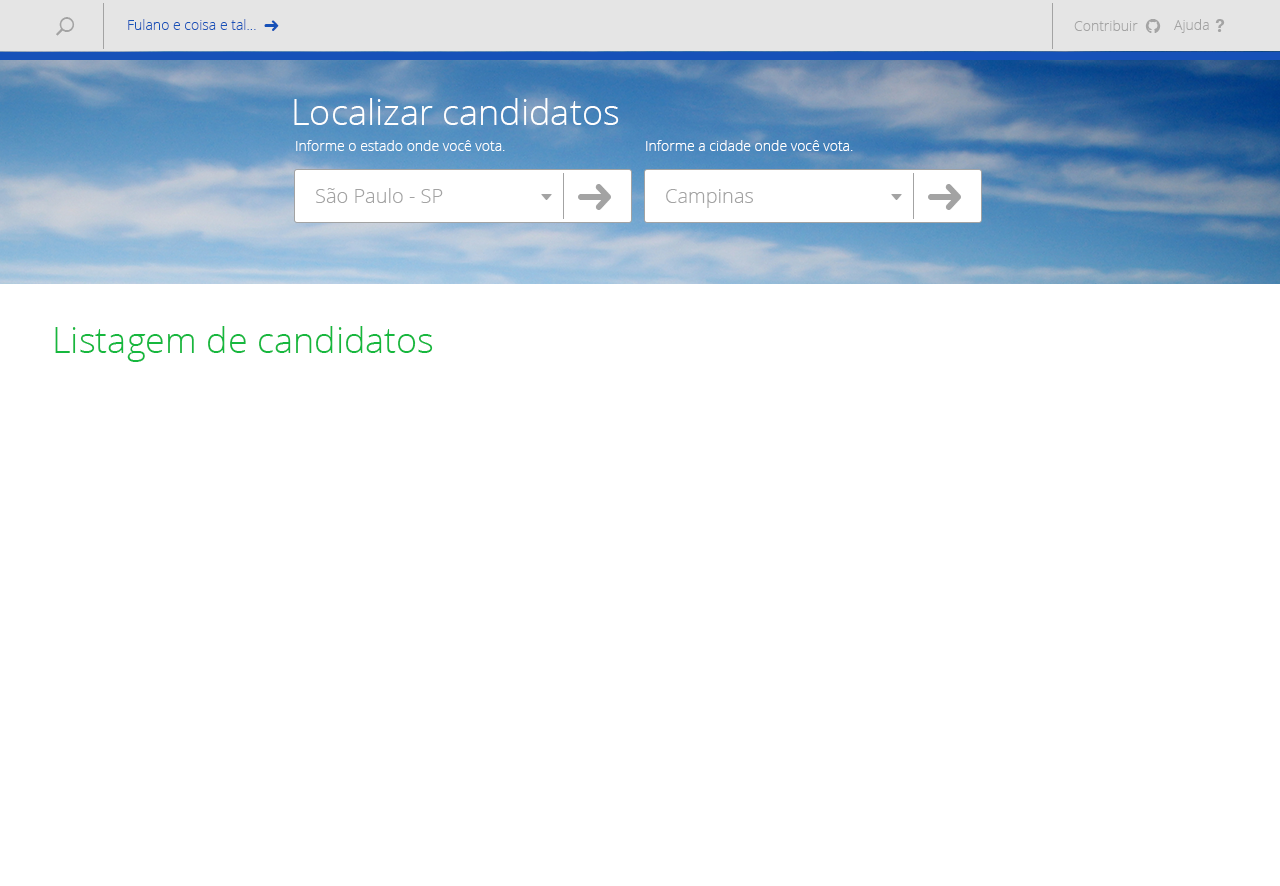
<style>
.page{position:relative;width:1280px;height:886px;background:#ffffff}
.page>*{position:absolute;margin:0}
.t1{font:14px "OpenSans-Light";color:#1651b8}
.t2{font:14px "OpenSans-Light";color:#a4a4a4}
.t3{font:36px "OpenSans-Light";color:#ffffff}
.t4{font:14px "OpenSans-Light";color:#ffffff}
.t5{font:20px "OpenSans-Light";color:#a3a3a3}
.t6{font:36px "OpenSans-Light";color:#16b83e}
</style>
<div class="page">
<p class="t1" style="left:128px;top:19px;width:128px;height:11px">Fulano e coisa e tal...</p>
<p class="t2" style="left:1074px;top:20px;width:64px;height:11px">Contribuir</p>
<p class="t2" style="left:1174px;top:19px;width:35px;height:14px">Ajuda</p>
<p class="t3" style="left:294px;top:98px;width:325px;height:27px">Localizar candidatos</p>
<p class="t4" style="left:296px;top:140px;width:209px;height:11px">Informe o estado onde você vota.</p>
<p class="t4" style="left:646px;top:140px;width:207px;height:11px">Informe a cidade onde você vota.</p>
<p class="t5" style="left:316px;top:188px;width:127px;height:15px">São Paulo - SP</p>
<p class="t5" style="left:666px;top:189px;width:87px;height:19px">Campinas</p>
<p class="t6" style="left:55px;top:326px;width:378px;height:36px">Listagem de candidatos</p>
</div>
